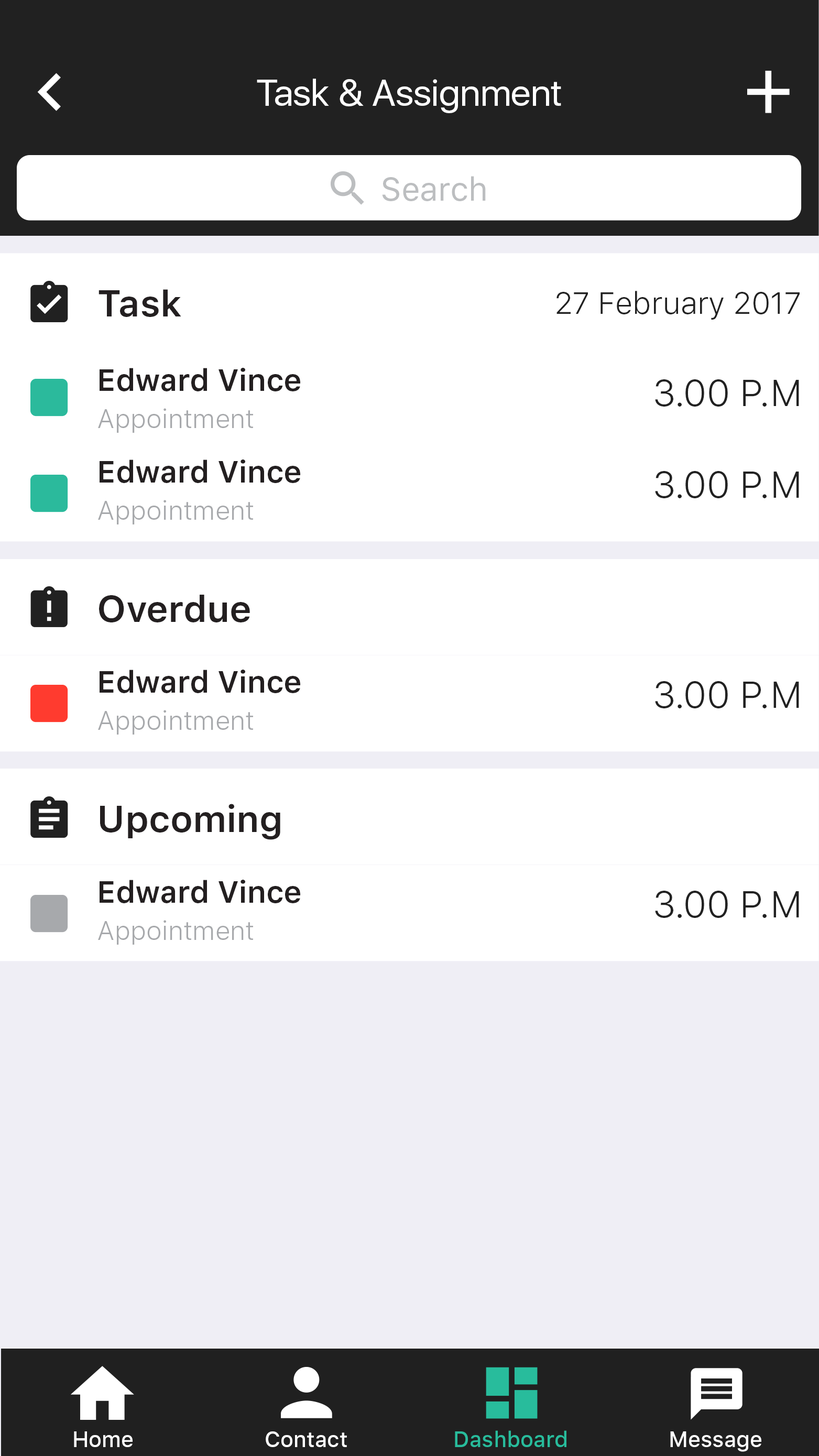
<style>
.page{position:relative;width:819px;height:1456px;background:#ffffff}
.page>*{position:absolute;margin:0}
.t1{font:37.1px "SFUIDisplay-Regular";color:#ffffff}
.t2{font:32.7px "SFUIText-Regular";color:#bcbec0}
.t3{font:37.1px "SFUIText-Semibold";color:#231f20}
.t4{font:30.6px "SFUIText-Light";color:#212121}
.t5{font:30.6px "SFUIText-Semibold";color:#231f20}
.t6{font:37.1px "SFUIText-Light";color:#212121}
.t7{font:26.2px "SFUIText-Light";color:#a7a9ac}
.t8{font:21.8px "SFUIText-Medium";color:#ffffff}
.t9{font:21.8px "SFUIText-Medium";color:#28bc9c}
</style>
<div class="page">
<p class="t1" style="left:257px;top:79px;width:304px;height:34px">Task &amp; Assignment</p>
<p class="t2" style="left:382px;top:176px;width:104px;height:25px">Search</p>
<p class="t3" style="left:99px;top:289px;width:82px;height:28px">Task</p>
<p class="t4" style="left:556px;top:291px;width:244px;height:29px">27 February 2017</p>
<p class="t5" style="left:100px;top:368px;width:200px;height:23px">Edward Vince</p>
<p class="t6" style="left:655px;top:379px;width:144px;height:28px">3.00 P.M</p>
<p class="t7" style="left:98px;top:408px;width:155px;height:25px">Appointment</p>
<p class="t5" style="left:100px;top:460px;width:200px;height:23px">Edward Vince</p>
<p class="t6" style="left:655px;top:471px;width:144px;height:27px">3.00 P.M</p>
<p class="t7" style="left:98px;top:500px;width:155px;height:24px">Appointment</p>
<p class="t3" style="left:99px;top:595px;width:151px;height:27px">Overdue</p>
<p class="t5" style="left:100px;top:670px;width:200px;height:23px">Edward Vince</p>
<p class="t6" style="left:655px;top:681px;width:144px;height:27px">3.00 P.M</p>
<p class="t7" style="left:98px;top:710px;width:155px;height:25px">Appointment</p>
<p class="t3" style="left:100px;top:804px;width:180px;height:36px">Upcoming</p>
<p class="t5" style="left:100px;top:880px;width:200px;height:23px">Edward Vince</p>
<p class="t6" style="left:655px;top:891px;width:144px;height:27px">3.00 P.M</p>
<p class="t7" style="left:98px;top:920px;width:155px;height:25px">Appointment</p>
<p class="t8" style="left:74px;top:1431px;width:59px;height:16px">Home</p>
<p class="t8" style="left:266px;top:1431px;width:81px;height:16px">Contact</p>
<p class="t9" style="left:455px;top:1430px;width:111px;height:17px">Dashboard</p>
<p class="t8" style="left:670px;top:1431px;width:91px;height:21px">Message</p>
</div>
